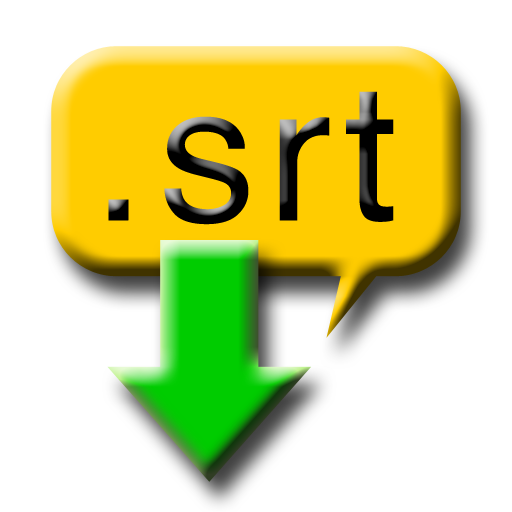
<style>
.page{position:relative;width:512px;height:512px;background:#ffffff}
.page>*{position:absolute;margin:0}
.t1{font:192px "Helvetica";letter-spacing:0.04em;color:#000000;font-weight:bold}
</style>
<div class="page">
<p class="t1" style="left:108px;top:91px;width:286px;height:134px">.srt</p>
</div>
